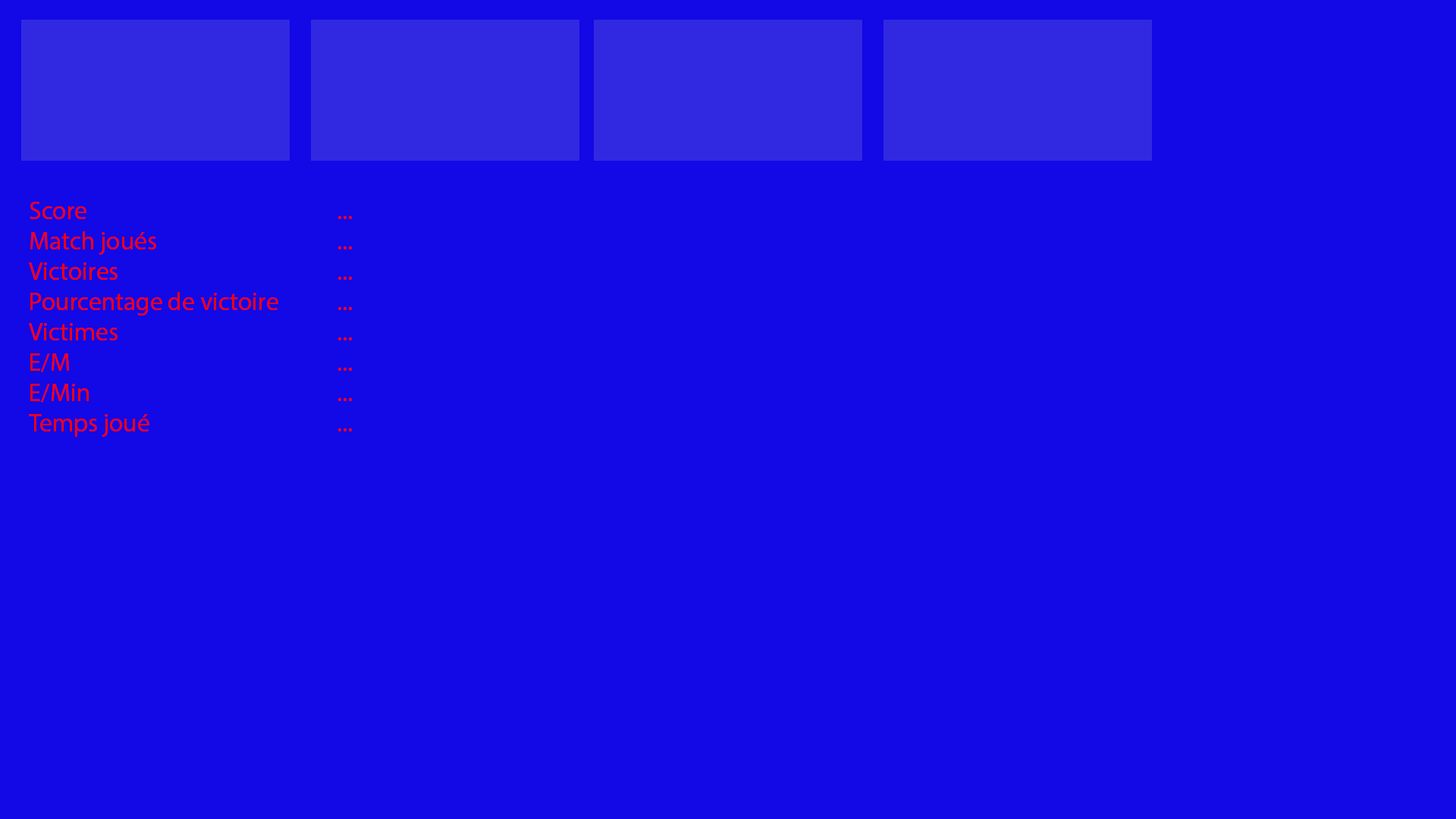
<style>
.page{position:relative;width:1456px;height:819px;background:#1308e6}
.page>*{position:absolute;margin:0}
.t1{font:25.3px "MyriadPro-Regular";color:#ff0000}
</style>
<div class="page">
<p class="t1" style="left:29px;top:202px;width:249px;height:235px">Score<br>Match joués<br>Victoires<br>Pourcentage de victoire<br>Victimes<br>E/M<br>E/Min<br>Temps joué</p>
<p class="t1" style="left:338px;top:215px;width:14px;height:216px">...<br>...<br>...<br>...<br>...<br>...<br>...<br>...</p>
</div>
